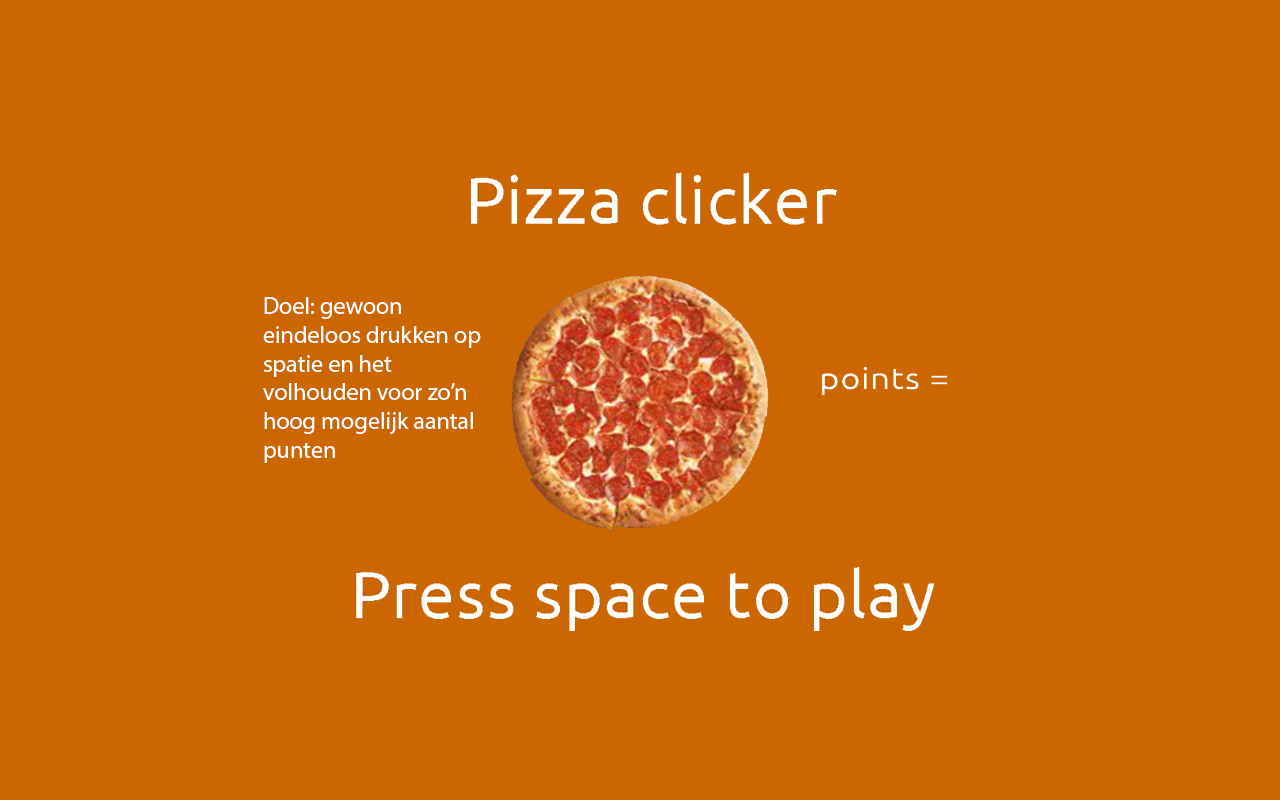
<style>
.page{position:relative;width:1280px;height:800px;background:#cc6600}
.page>*{position:absolute;margin:0}
.t1{font:24px "MyriadPro-Regular";color:#ffffff}
</style>
<div class="page">
<p class="t1" style="left:263px;top:297px;width:218px;height:166px">Doel: gewoon eindeloos drukken op spatie en het volhouden voor zo’n hoog mogelijk aantal punten</p>
</div>
